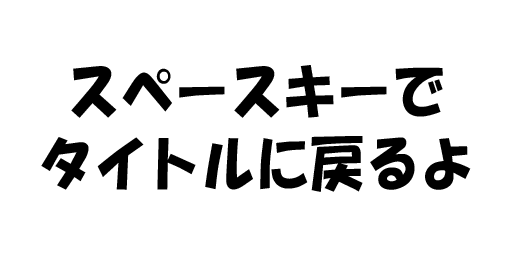
<style>
.page{position:relative;width:512px;height:256px;background:#ffffff}
.page>*{position:absolute;margin:0}
.t1{font:59.8px/71.7px "HGSoeiKakupoptai";color:#000000;scale:0.91 1}
</style>
<div class="page">
<p class="t1" style="left:41px;top:65px;width:430px;height:127px;text-align:center">スペースキーで<br>タイトルに戻るよ</p>
</div>
